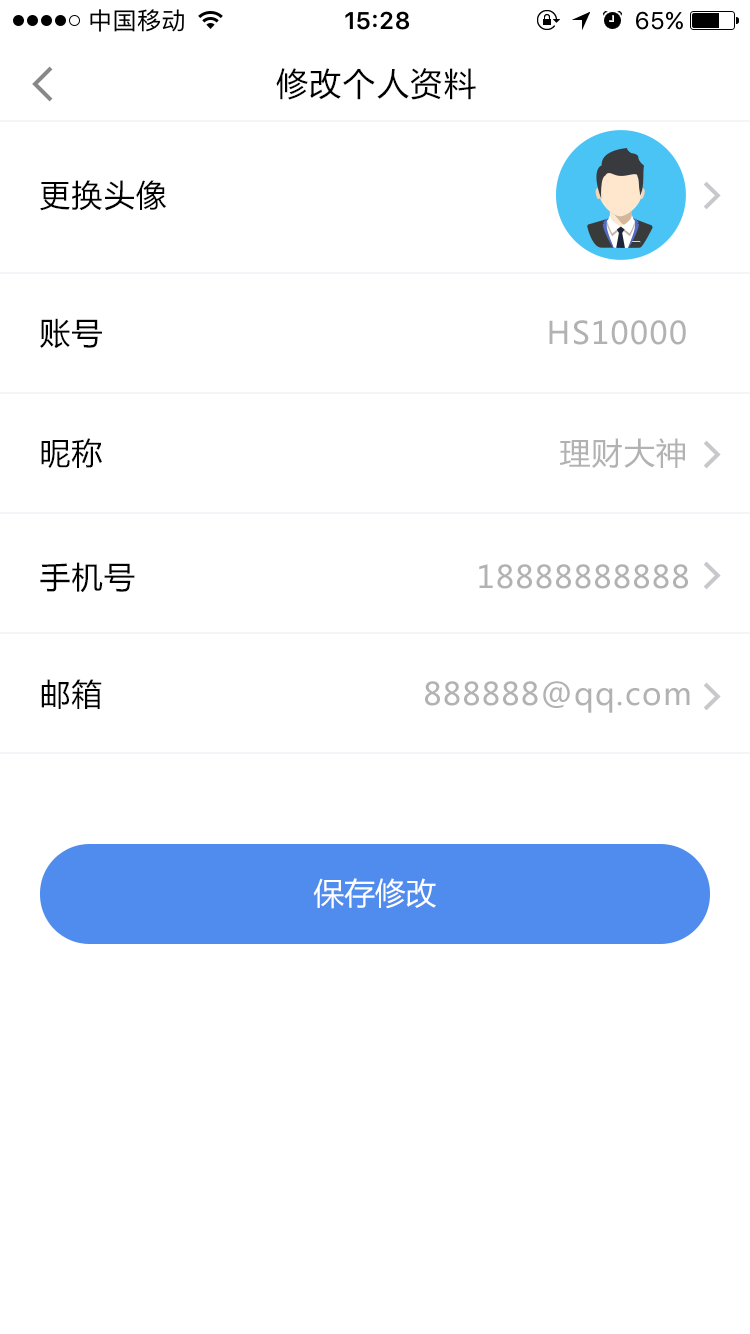
<style>
.page{position:relative;width:750px;height:1334px;background:#ffffff}
.page>*{position:absolute;margin:0}
.t1{font:32px "MicrosoftYaHei";letter-spacing:0.05em;color:#000000}
.t2{font:30.7px "MicrosoftYaHei";letter-spacing:0.05em;color:#000000}
.t3{font:30.7px "MicrosoftYaHei";letter-spacing:0.05em;color:#b2b2b2}
.t4{font:30.7px "MicrosoftYaHei";color:#ffffff}
</style>
<div class="page">
<p class="t1" style="left:276px;top:68px;width:200px;height:32px">修改个人资料</p>
<p class="t2" style="left:40px;top:180px;width:127px;height:31px">更换头像</p>
<p class="t2" style="left:40px;top:318px;width:62px;height:31px">账号</p>
<p class="t3" style="left:549px;top:320px;width:137px;height:25px">HS10000</p>
<p class="t2" style="left:41px;top:438px;width:61px;height:31px">昵称</p>
<p class="t3" style="left:559px;top:438px;width:126px;height:30px">理财大神</p>
<p class="t2" style="left:40px;top:562px;width:95px;height:31px">手机号</p>
<p class="t3" style="left:479px;top:564px;width:209px;height:25px">18888888888</p>
<p class="t2" style="left:41px;top:679px;width:61px;height:30px">邮箱</p>
<p class="t3" style="left:425px;top:681px;width:265px;height:32px">888888@qq.com</p>
<p class="t4" style="left:313px;top:878px;width:123px;height:31px">保存修改</p>
</div>
